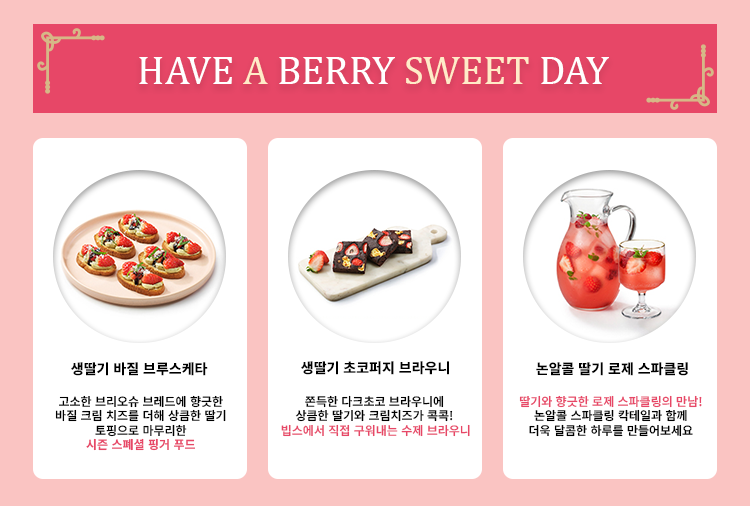
<style>
.page{position:relative;width:750px;height:506px;background:#ffffff}
.page>*{position:absolute;margin:0}
.t1{font:40px "CambriaMath";color:#ffffff}
.t2{font:40px "CambriaMath";color:#ffebc8}
.t3{font:14px "NotoSansKR-ExtraBold";color:#000000}
.t4{font:12px "NotoSansKR-SemiBold";color:#000000}
.t5{font:12px "NotoSansKR-Bold";color:#e74767}
.t6{font:12px "NotoSansKR-SemiBold";color:#e74767}
</style>
<div class="page">
<p class="t1" style="left:139px;top:57px;width:470px;height:27px">HAVE <span class="t2">A</span> BERRY <span class="t2">SWEET</span> DAY</p>
<p class="t3" style="left:71px;top:362px;width:137px;height:14px">생딸기 바질 브루스케타</p>
<p class="t3" style="left:301px;top:361px;width:148px;height:14px">생딸기 초코퍼지 브라우니</p>
<p class="t3" style="left:536px;top:362px;width:152px;height:14px">논알콜 딸기 로제 스파클링</p>
<p class="t4" style="left:55px;top:395px;width:171px;height:56px;text-align:center">고소한 브리오슈 브레드에 향긋한<br>바질 크림 치즈를 더해 상큼한 딸기<br>토핑으로 마무리한<br><span class="t5">시즌 스폐셜 핑거 푸드</span></p>
<p class="t4" style="left:281px;top:395px;width:189px;height:42px;text-align:center">쫀득한 다크초코 브라우니에 <br>상큼한 딸기와 크림치즈가 콕콕! <br><span class="t6">빕스에서 직접 구워내는 수제 브라우니</span></p>
<p class="t4" style="left:519px;top:395px;width:183px;height:42px;text-align:center"><span class="t6">딸기와 향긋한 로제 스파클링의 만남!<br></span>논알콜 스파클링 칵테일과 함께<br>더욱 달콤한 하루를 만들어보세요</p>
</div>
